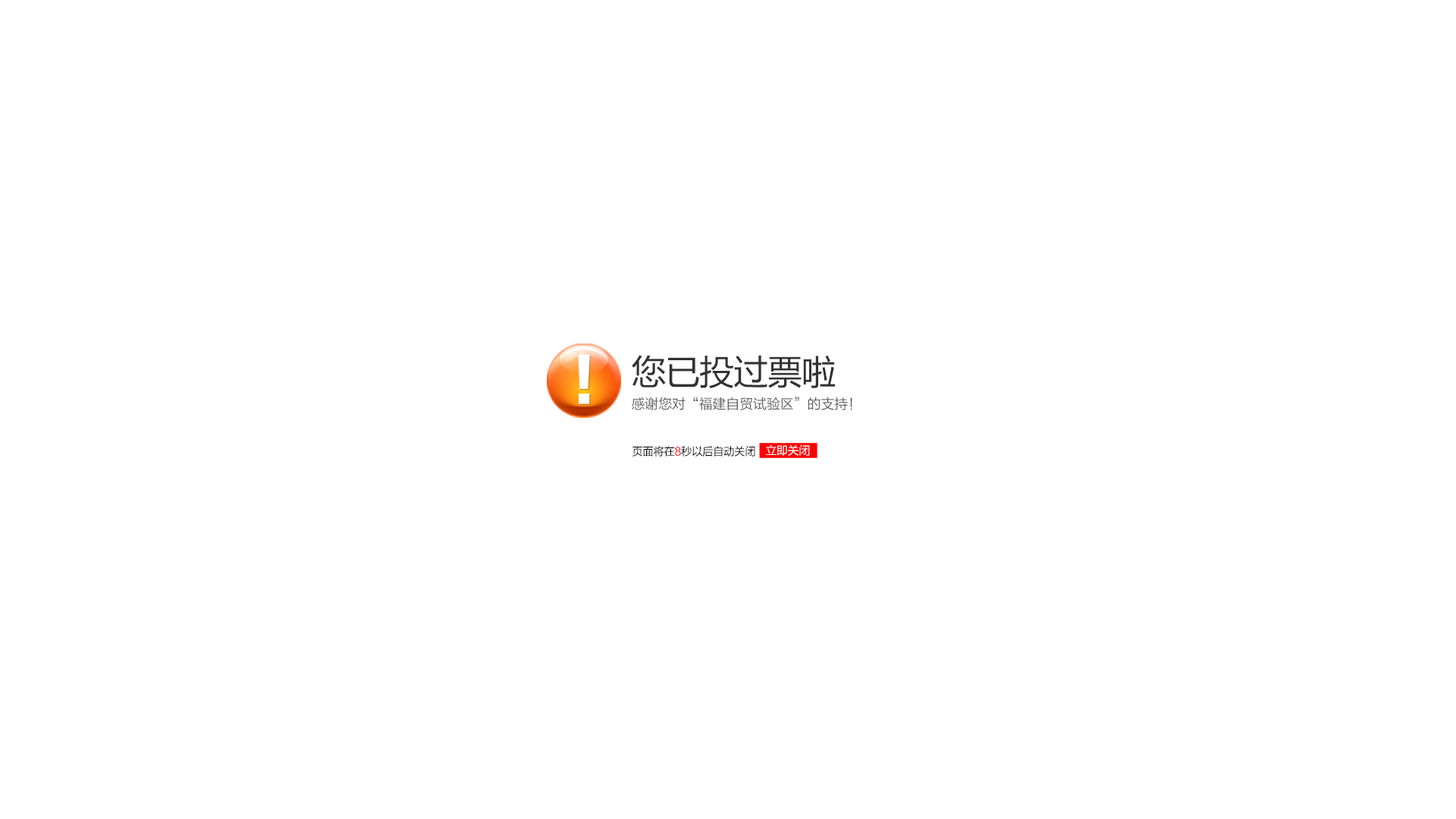
<style>
.page{position:relative;width:1456px;height:819px;background:#ffffff}
.page>*{position:absolute;margin:0}
.t1{font:57.4px "FZLTTHK--GBK1-0";color:#ffffff;scale:0.95 1}
.t2{font:34.3px "MicrosoftYaHei";letter-spacing:-0.01em;color:#323232}
.t3{font:13.9px "FZLTHK--GBK1-0";letter-spacing:-0.01em;color:#646464}
.t4{font:11.1px "FZLTHK--GBK1-0";letter-spacing:-0.01em;color:#000000;scale:0.96 1}
.t5{font:11.1px "FZLTHK--GBK1-0";letter-spacing:-0.01em;color:#ff0000;scale:0.96 1}
.t6{font:11.1px "MicrosoftYaHei";letter-spacing:-0.01em;color:#ffffff}
</style>
<div class="page">
<p class="t1" style="left:578px;top:354px;width:12px;height:50px">！</p>
<p class="t2" style="left:632px;top:355px;width:204px;height:33px">您已投过票啦</p>
<p class="t3" style="left:632px;top:397px;width:220px;height:13px">感谢您对“福建自贸试验区”的支持！</p>
<p class="t4" style="left:632px;top:446px;width:123px;height:11px">页面将在<span class="t5">8</span>秒以后自动关闭</p>
<p class="t6" style="left:766px;top:444px;width:44px;height:12px">立即关闭</p>
</div>
